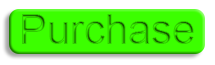
<style>
.page{position:relative;width:215px;height:65px;background:#3cff00}
.page>*{position:absolute;margin:0}
.t1{font:41.7px "ArialMT"}
</style>
<div class="page">
<p class="t1" style="left:22px;top:14px;width:172px;height:30px">Purchase</p>
</div>
